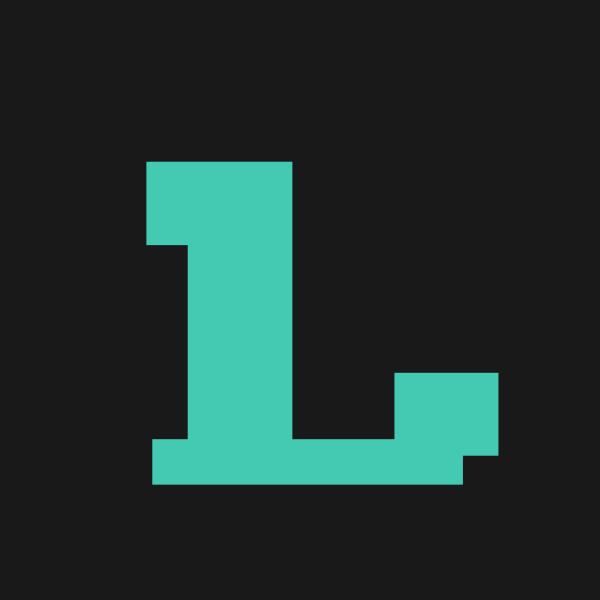
<style>
.page{position:relative;width:600px;height:600px;background:#191919}
.page>*{position:absolute;margin:0}
.t1{font:526.4px "mr_HouseFlyG";color:#44c9b2;scale:1.25 1}
</style>
<div class="page">
<p class="t1" style="left:146px;top:161px;width:353px;height:324px">L</p>
</div>
